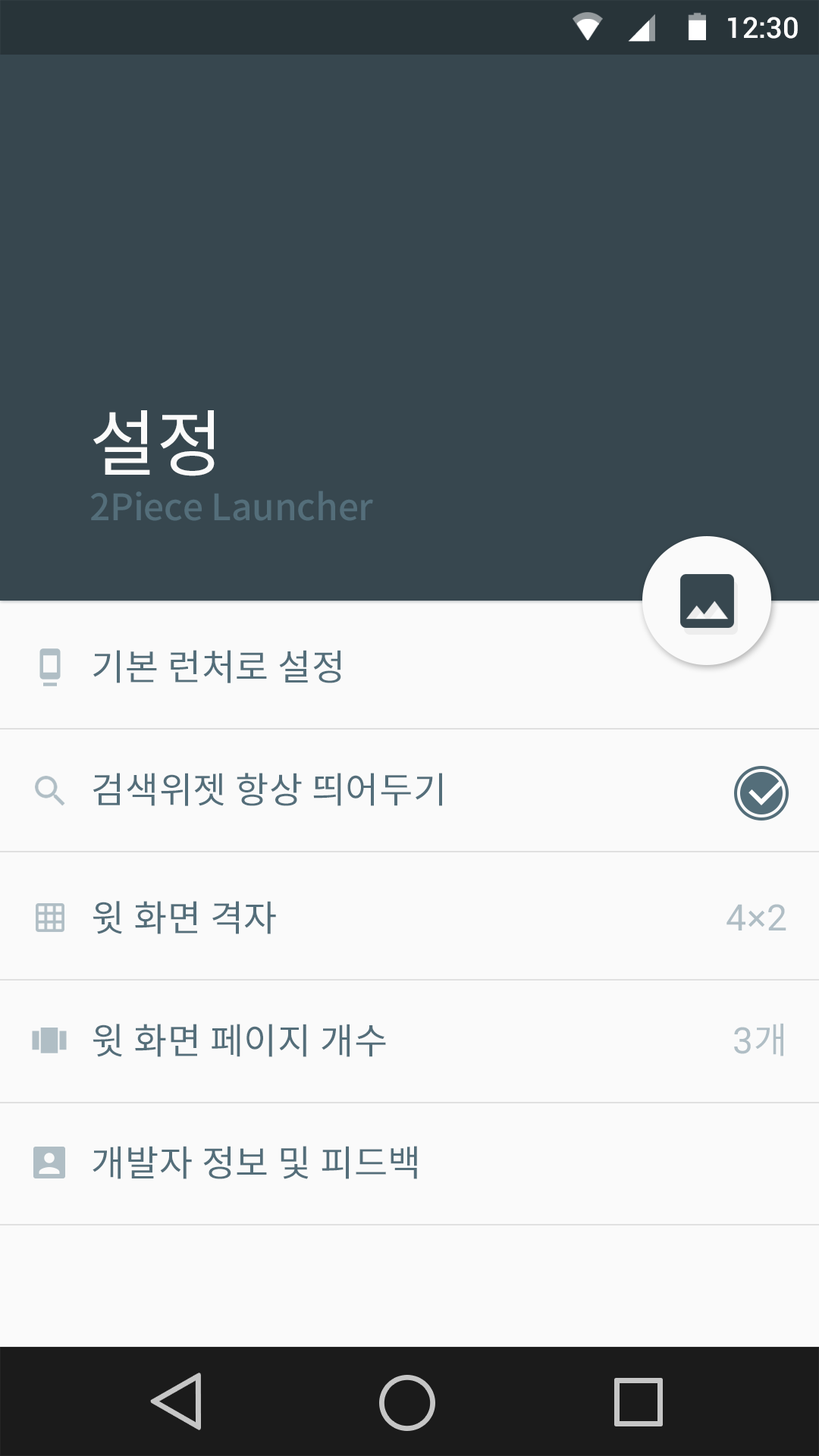
<style>
.page{position:relative;width:819px;height:1456px;background:#fafafa}
.page>*{position:absolute;margin:0}
.t1{font:28.8px "Roboto-Medium";color:#ffffff}
.t2{font:72.8px "NotoSansCJKkr-Regular";letter-spacing:-0.005em;color:#fafafa}
.t3{font:36.4px "NotoSansCJKkr-Medium";letter-spacing:-0.005em;color:#546e7a}
.t4{font:36.4px "NotoSansCJKkr-Regular";letter-spacing:0.01em;color:#546e7a}
.t5{font:36.3px "Roboto-Regular";letter-spacing:0.01em;color:#b0bec5}
.t6{font:36.3px "NotoSansCJKkr-Regular";letter-spacing:0.01em;color:#b0bec5}
</style>
<div class="page">
<p class="t1" style="left:728px;top:17px;width:70px;height:22px">12:30</p>
<p class="t2" style="left:93px;top:410px;width:122px;height:66px">설정</p>
<p class="t3" style="left:91px;top:491px;width:282px;height:30px">2Piece Launcher</p>
<p class="t4" style="left:93px;top:650px;width:248px;height:33px">기본 런처로 설정</p>
<p class="t4" style="left:93px;top:773px;width:349px;height:33px">검색위젯 항상 띄어두기</p>
<p class="t4" style="left:93px;top:901px;width:183px;height:33px">윗 화면 격자</p>
<p class="t5" style="left:726px;top:904px;width:60px;height:26px">4×2</p>
<p class="t4" style="left:93px;top:1024px;width:293px;height:33px">윗 화면 페이지 개수</p>
<p class="t5" style="left:734px;top:1023px;width:49px;height:33px">3<span class="t6">개</span></p>
<p class="t4" style="left:93px;top:1146px;width:324px;height:33px">개발자 정보 및 피드백</p>
</div>
